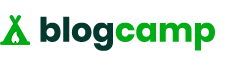
<style>
.page{position:relative;width:230px;height:60px;background:#ffffff}
.page>*{position:absolute;margin:0}
.t1{font:33.3px "Poppins-Bold";color:#03382e}
.t2{font:33.3px "Poppins-Bold";color:#00ab15}
</style>
<div class="page">
<p class="t1" style="left:40px;top:16px;width:175px;height:35px">blog<span class="t2">camp</span></p>
</div>
